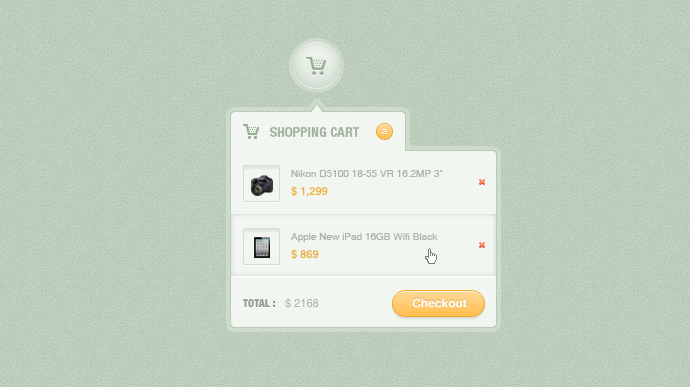
<style>
.page{position:relative;width:690px;height:387px;background:#c2d2c0}
.page>*{position:absolute;margin:0}
.t1{font:14px "HelveticaNeueLTPro-BdCn";color:#a3b2a1}
.t2{font:8px "Kroeger0853";color:#ffffff}
.t3{font:10px "Helvetica";color:#a9b7a7}
.t4{font:11px "Helvetica";color:#edaf44}
.t5{font:11px "HelveticaNeueLTPro-BlkCn";color:#8fa08d}
.t6{font:11px "HelveticaNeueLTPro-BlkCn";color:#80937d}
.t7{font:11px "Helvetica";color:#a3b2a1}
.t8{font:12px "Helvetica-Bold";color:#ffffff}
</style>
<div class="page">
<p class="t1" style="left:270px;top:127px;width:90px;height:10px">SHOPPING CART</p>
<p class="t2" style="left:382px;top:129px;width:5px;height:5px">2</p>
<p class="t3" style="left:291px;top:170px;width:152px;height:7px">Nikon D5100 18-55 VR 16.2MP 3"</p>
<p class="t4" style="left:291px;top:186px;width:37px;height:11px">$ 1,299</p>
<p class="t3" style="left:291px;top:233px;width:147px;height:9px">Apple New iPad 16GB Wifi Black</p>
<p class="t4" style="left:291px;top:249px;width:28px;height:11px">$ 869</p>
<p class="t5" style="left:243px;top:299px;width:32px;height:9px">TOTAL <span class="t6">:</span></p>
<p class="t7" style="left:285px;top:298px;width:34px;height:11px">$ 2168</p>
<p class="t8" style="left:412px;top:298px;width:55px;height:10px">Checkout</p>
</div>
